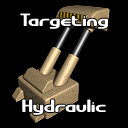
<style>
.page{position:relative;width:128px;height:128px;background:#000000}
.page>*{position:absolute;margin:0}
.t1{font:18px "GravitateBRK";color:#ffffff}
</style>
<div class="page">
<p class="t1" style="left:20px;top:13px;width:88px;height:16px">Targeting</p>
<p class="t1" style="left:22px;top:99px;width:84px;height:16px">Hydraulic</p>
</div>
